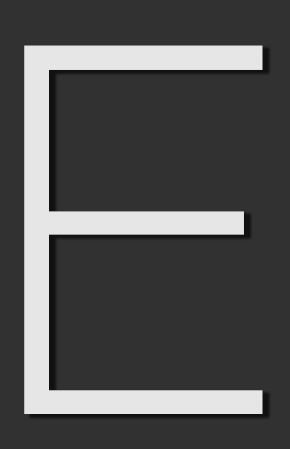
<style>
.page{position:relative;width:290px;height:449px;background:#313131}
.page>*{position:absolute;margin:0}
.t1{font:500px "ShreeDev0714";letter-spacing:0.075em;color:#e6e6e6;text-transform:uppercase}
</style>
<div class="page">
<p class="t1" style="left:24px;top:45px;width:239px;height:369px">e</p>
</div>
